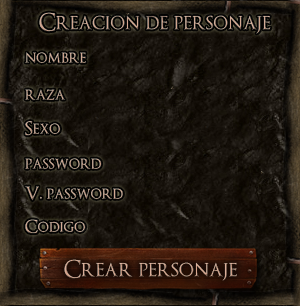
<style>
.page{position:relative;width:300px;height:306px}
.page>*{position:absolute;margin:0}
.t1{font:24px "OptimusPrinceps";color:#d2a58e}
.t2{font:18px "OptimusPrinceps";color:#d3a892}
.t3{font:18px "OptimusPrinceps"}
.t4{font:18px "OptimusPrinceps";color:#d1a58e}
.t5{font:18px "OptimusPrinceps";color:#d2a58e}
.t6{font:17.4px "OptimusPrinceps";color:#d3a790;scale:1.03 1}
.t7{font:24px "OptimusPrinceps";color:#d7a68e}
</style>
<div class="page">
<p class="t1" style="left:39px;top:12px;width:232px;height:22px">Creacion de personaje</p>
<p class="t2" style="left:25px;top:52px;width:61px;height:12px">nombre</p>
<p class="t3" style="left:25px;top:89px;width:40px;height:12px">raza</p>
<p class="t4" style="left:25px;top:121px;width:36px;height:15px">Sexo</p>
<p class="t3" style="left:25px;top:158px;width:77px;height:12px">password</p>
<p class="t5" style="left:25px;top:186px;width:98px;height:15px">V. password</p>
<p class="t6" style="left:25px;top:219px;width:61px;height:15px">Codigo</p>
<p class="t7" style="left:64px;top:259px;width:173px;height:22px">Crear personaje</p>
</div>
